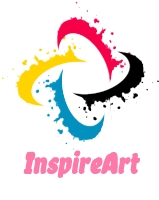
<style>
.page{position:relative;width:159px;height:200px;background:#ffffff}
.page>*{position:absolute;margin:0}
.t1{font:29.7px "ChelaOne-Regular";letter-spacing:-0.005em;color:#fd79a8;font-weight:bold;font-style:italic;scale:0.93 1}
</style>
<div class="page">
<p class="t1" style="left:23px;top:150px;width:117px;height:28px">InspireArt</p>
</div>
